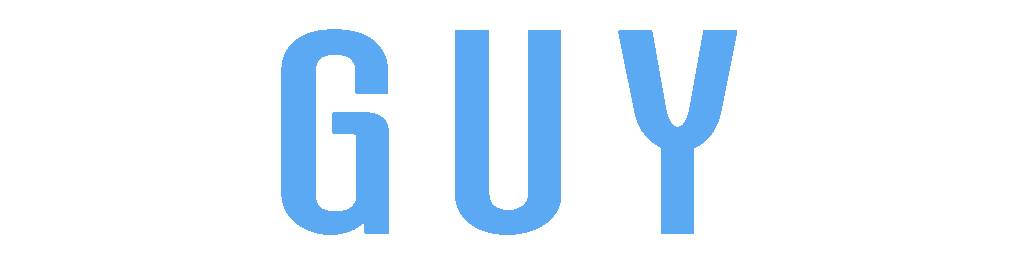
<style>
.page{position:relative;width:1024px;height:265px;background:#ffffff}
.page>*{position:absolute;margin:0}
.t1{font:286.6px "Brougham-Condensed";letter-spacing:0.1em;color:#59a9f2;font-weight:bold;scale:1.04 1}
</style>
<div class="page">
<p class="t1" style="left:281px;top:29px;width:456px;height:206px">GUY</p>
</div>
